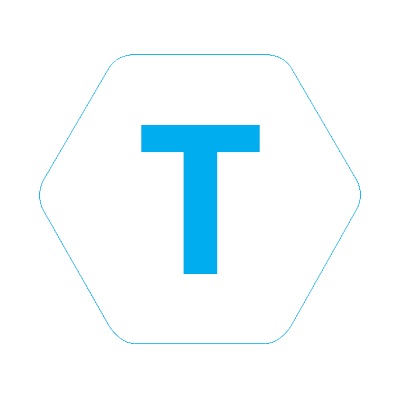
<style>
.page{position:relative;width:400px;height:400px;background:#ffffff}
.page>*{position:absolute;margin:0}
.t1{font:213.3px "MicrosoftNewTaiLue-Bold";color:#00adee}
</style>
<div class="page">
<p class="t1" style="left:141px;top:124px;width:119px;height:150px">T</p>
</div>
